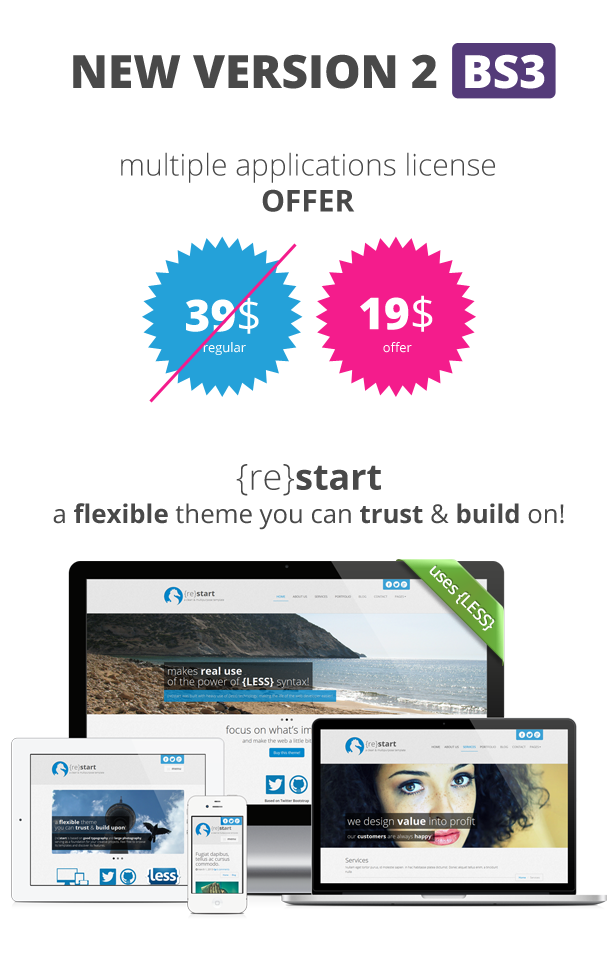
<style>
.page{position:relative;width:616px;height:967px;background:#ffffff}
.page>*{position:absolute;margin:0}
.t1{font:46px "OpenSans-Extrabold";color:#494949}
.t2{font:46px "OpenSans-Extrabold";color:#ffffff}
.t3{font:30px "OpenSans-Light";color:#494949}
.t4{font:30px "OpenSans-Bold";color:#494949}
.t5{font:44.1px "OpenSans-Extrabold";color:#ffffff}
.t6{font:44.1px "OpenSans";color:#ffffff}
.t7{font:12.9px "OpenSans";color:#ffffff}
.t8{font:25.7px/33.2px "OpenSans";color:#494949}
.t9{font:36px/36.4px "OpenSans-Light";color:#494949}
.t10{font:36px/33.2px "OpenSans-Light";color:#494949}
.t11{font:36px/33.2px "OpenSans-Bold";color:#494949}
.t12{font:25.7px/33.2px "OpenSans-Bold";color:#494949}
.t13{font:17px "OpenSans-Semibold";letter-spacing:-0.035em;color:#ffffff}
</style>
<div class="page">
<p class="t1" style="left:73px;top:54px;width:472px;height:35px">NEW VERSION 2  <span class="t2">BS3</span></p>
<p class="t3" style="left:121px;top:152px;width:374px;height:60px;text-align:center">multiple applications license<br><span class="t4">OFFER</span></p>
<p class="t5" style="left:186px;top:297px;width:73px;height:37px">39<span class="t6">$</span></p>
<p class="t5" style="left:360px;top:295px;width:73px;height:37px">19<span class="t6">$</span></p>
<p class="t7" style="left:203px;top:342px;width:43px;height:13px">regular</p>
<p class="t7" style="left:383px;top:342px;width:29px;height:11px">offer</p>
<p class="t8" style="left:53px;top:464px;width:511px;height:66px;text-align:center"><span class="t9">{</span><span class="t10">re}</span><span class="t11">start<br></span>a <span class="t12">flexible </span>theme you can <span class="t12">trust </span>&amp; <span class="t12">build</span> on!</p>
<p class="t13" style="left:429px;top:565px;width:66px;height:66px;rotate:45deg">uses {LESS}</p>
</div>
